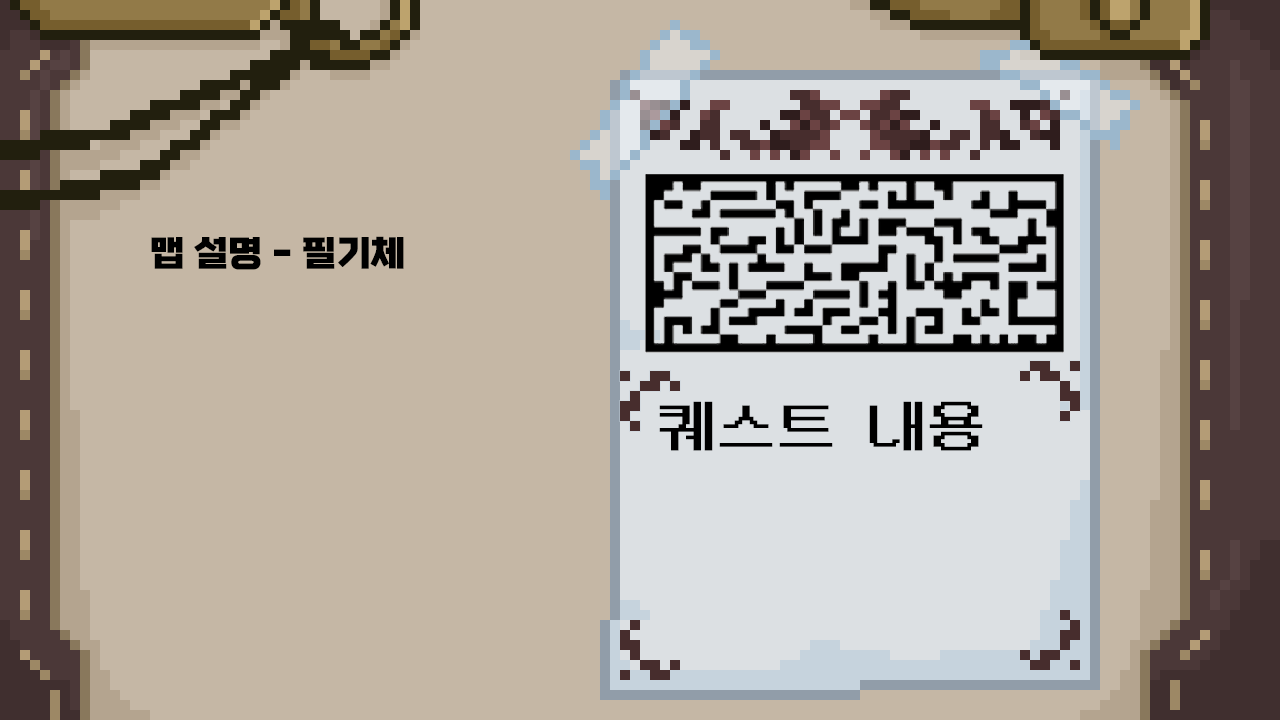
<style>
.page{position:relative;width:1280px;height:720px;background:#c5b7a5}
.page>*{position:absolute;margin:0}
.t1{font:36px "esamanruBold";color:#000000}
.t2{font:60px "NeoDunggeunmoCode-Regular";color:#000000}
</style>
<div class="page">
<p class="t1" style="left:151px;top:236px;width:253px;height:34px">맵 설명 - 필기체</p>
<p class="t2" style="left:659px;top:401px;width:324px;height:50px">퀘스트 내용</p>
</div>
